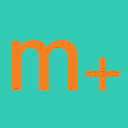
<style>
.page{position:relative;width:128px;height:128px;background:#34cbb4}
.page>*{position:absolute;margin:0}
.t1{font:90px "RodinProN-DB";letter-spacing:-0.02em;color:#f48020}
.t2{font:60px "RodinProN-DB";letter-spacing:-0.02em;color:#f48020}
</style>
<div class="page">
<p class="t1" style="left:12px;top:40px;width:109px;height:51px">m<span class="t2">+</span></p>
</div>
